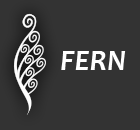
<style>
.page{position:relative;width:140px;height:130px;background:#333333}
.page>*{position:absolute;margin:0}
.t1{font:30px "Candara-BoldItalic";color:#ffffff}
</style>
<div class="page">
<p class="t1" style="left:61px;top:51px;width:65px;height:19px">FERN</p>
</div>
